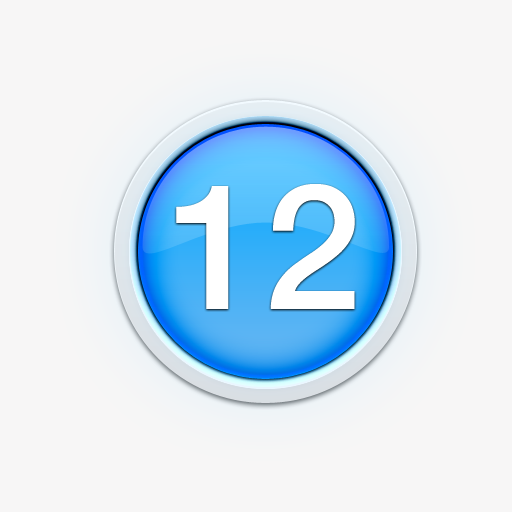
<style>
.page{position:relative;width:512px;height:512px;background:#f7f6f6}
.page>*{position:absolute;margin:0}
.t1{font:175px "HelveticaNeue-Medium";color:#ffffff}
</style>
<div class="page">
<p class="t1" style="left:176px;top:184px;width:179px;height:125px">12</p>
</div>
